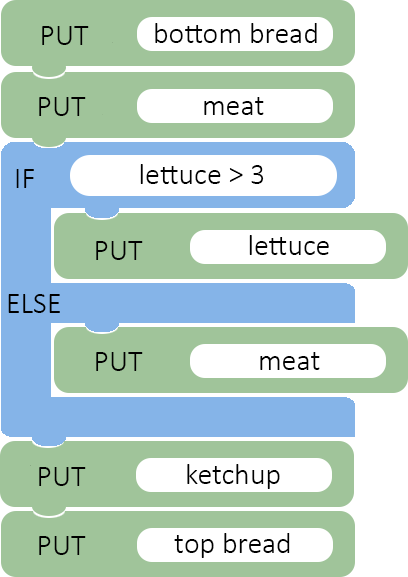
<style>
.page{position:relative;width:408px;height:577px;background:#a0c49a}
.page>*{position:absolute;margin:0}
.t1{font:30px "Calibri-Light";color:#000000}
</style>
<div class="page">
<p class="t1" style="left:42px;top:26px;width:47px;height:19px">PUT</p>
<p class="t1" style="left:155px;top:23px;width:162px;height:20px">bottom bread</p>
<p class="t1" style="left:39px;top:97px;width:47px;height:19px">PUT</p>
<p class="t1" style="left:204px;top:97px;width:60px;height:18px">meat</p>
<p class="t1" style="left:16px;top:169px;width:18px;height:19px">IF</p>
<p class="t1" style="left:140px;top:164px;width:124px;height:20px">lettuce &gt; 3</p>
<p class="t1" style="left:96px;top:241px;width:47px;height:19px">PUT</p>
<p class="t1" style="left:249px;top:235px;width:80px;height:20px">lettuce</p>
<p class="t1" style="left:8px;top:294px;width:52px;height:19px">ELSE</p>
<p class="t1" style="left:96px;top:352px;width:47px;height:19px">PUT</p>
<p class="t1" style="left:260px;top:352px;width:60px;height:18px">meat</p>
<p class="t1" style="left:39px;top:467px;width:47px;height:19px">PUT</p>
<p class="t1" style="left:187px;top:464px;width:93px;height:25px">ketchup</p>
<p class="t1" style="left:174px;top:533px;width:116px;height:25px">top bread</p>
<p class="t1" style="left:39px;top:536px;width:47px;height:19px">PUT</p>
</div>
